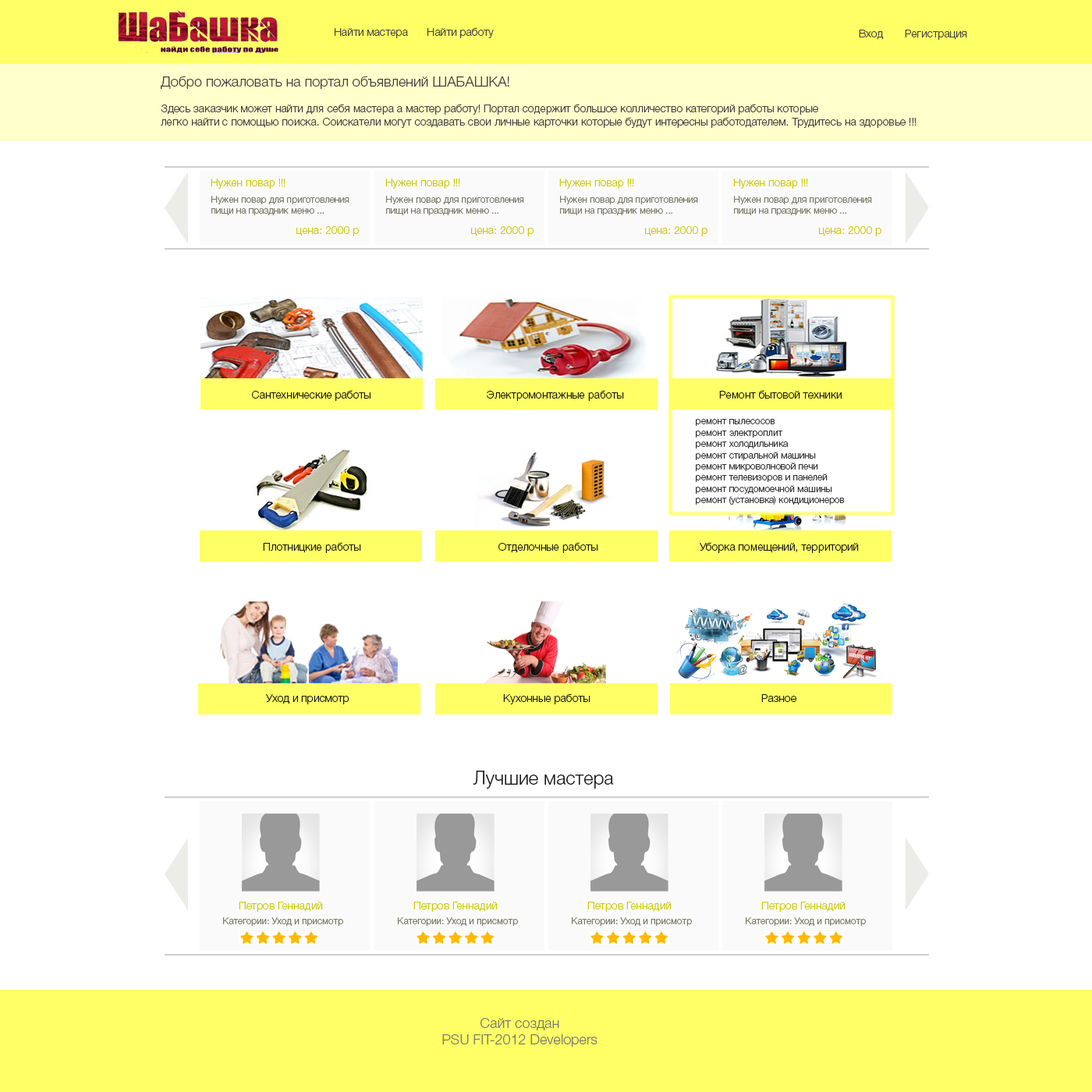
<style>
.page{position:relative;width:1092px;height:1092px;background:#ffffff}
.page>*{position:absolute;margin:0}
.t1{font:10.9px "HelveticaNeueCyr-Light";color:#444241}
.t2{font:10.9px "HelveticaNeueCyr-Light";color:#424040}
.t3{font:14px "HelveticaNeueCyr-Light";color:#423f3f}
.t4{font:10.9px "HelveticaNeueCyr-Light";color:#cccc00}
.t5{font:9.4px "HelveticaNeueCyr-Light";color:#7c7a6a}
.t6{font:10.9px "HelveticaNeueCyr-Light";color:#181818}
.t7{font:9.4px "HelveticaNeueCyr-Light";color:#333333}
.t8{font:18.7px "HelveticaNeueCyr-Light";color:#181818}
.t9{font:14px "HelveticaNeueCyr-Light";color:#7c7a6a}
</style>
<div class="page">
<p class="t1" style="left:335px;top:28px;width:73px;height:10px">Найти мастера</p>
<p class="t1" style="left:427px;top:27px;width:67px;height:11px">Найти работу</p>
<p class="t1" style="left:859px;top:30px;width:108px;height:10px">Вход       Регистрация</p>
<p class="t2" style="left:161px;top:76px;width:755px;height:52px"><span class="t3">Добро пожаловать на портал объявлений ШАБАШКА! <br></span><br>Здесь заказчик может найти для себя мастера а мастер работу! Портал содержит большое колличество категорий работы которые <br>легко найти с помощью поиска. Соискатели могут создавать свои личные карточки которые будут интересны работодателем. Трудитесь на здоровье !!!</p>
<p class="t4" style="left:211px;top:179px;width:74px;height:10px">Нужен повар !!!</p>
<p class="t4" style="left:385px;top:179px;width:75px;height:10px">Нужен повар !!!</p>
<p class="t4" style="left:559px;top:179px;width:75px;height:10px">Нужен повар !!!</p>
<p class="t4" style="left:733px;top:179px;width:75px;height:10px">Нужен повар !!!</p>
<p class="t5" style="left:211px;top:196px;width:138px;height:19px">Нужен повар для приготовления <br>пищи на праздник меню ...</p>
<p class="t5" style="left:386px;top:196px;width:138px;height:19px">Нужен повар для приготовления <br>пищи на праздник меню ...</p>
<p class="t5" style="left:560px;top:196px;width:138px;height:19px">Нужен повар для приготовления <br>пищи на праздник меню ...</p>
<p class="t5" style="left:734px;top:196px;width:138px;height:19px">Нужен повар для приготовления <br>пищи на праздник меню ...</p>
<p class="t4" style="left:296px;top:226px;width:63px;height:10px">цена: 2000 р</p>
<p class="t4" style="left:471px;top:226px;width:63px;height:10px">цена: 2000 р</p>
<p class="t4" style="left:645px;top:226px;width:62px;height:10px">цена: 2000 р</p>
<p class="t4" style="left:819px;top:226px;width:62px;height:10px">цена: 2000 р</p>
<p class="t6" style="left:252px;top:390px;width:118px;height:11px">Сантехнические работы</p>
<p class="t6" style="left:487px;top:390px;width:137px;height:11px">Электромонтажные работы</p>
<p class="t6" style="left:719px;top:390px;width:123px;height:9px">Ремонт бытовой техники</p>
<p class="t7" style="left:696px;top:419px;width:149px;height:86px">ремонт пылесосов<br>    ремонт электроплит<br>    ремонт холодильника<br>    ремонт стиральной машины<br>    ремонт микроволновой печи<br>    ремонт телевизоров и панелей<br>    ремонт посудомоечной машины<br>    ремонт (установка) кондиционеров</p>
<p class="t6" style="left:263px;top:542px;width:98px;height:11px">Плотницкие работы</p>
<p class="t6" style="left:498px;top:542px;width:100px;height:11px">Отделочные работы</p>
<p class="t6" style="left:700px;top:542px;width:159px;height:11px">Уборка помещений, территорий</p>
<p class="t6" style="left:266px;top:694px;width:83px;height:10px">Уход и присмотр</p>
<p class="t6" style="left:503px;top:693px;width:87px;height:11px">Кухонные работы</p>
<p class="t6" style="left:761px;top:694px;width:35px;height:8px">Разное</p>
<p class="t8" style="left:473px;top:771px;width:141px;height:18px">Лучшие мастера</p>
<p class="t4" style="left:239px;top:902px;width:84px;height:10px">Петров Геннадий</p>
<p class="t4" style="left:413px;top:902px;width:85px;height:10px">Петров Геннадий</p>
<p class="t4" style="left:587px;top:902px;width:85px;height:10px">Петров Геннадий</p>
<p class="t4" style="left:761px;top:902px;width:85px;height:10px">Петров Геннадий</p>
<p class="t5" style="left:223px;top:917px;width:120px;height:9px">Категории: Уход и присмотр</p>
<p class="t5" style="left:398px;top:917px;width:120px;height:9px">Категории: Уход и присмотр</p>
<p class="t5" style="left:572px;top:917px;width:120px;height:9px">Категории: Уход и присмотр</p>
<p class="t5" style="left:746px;top:917px;width:120px;height:9px">Категории: Уход и присмотр</p>
<p class="t9" style="left:442px;top:1018px;width:155px;height:29px;text-align:center">Сайт создан<br>PSU FIT-2012 Developers</p>
</div>
